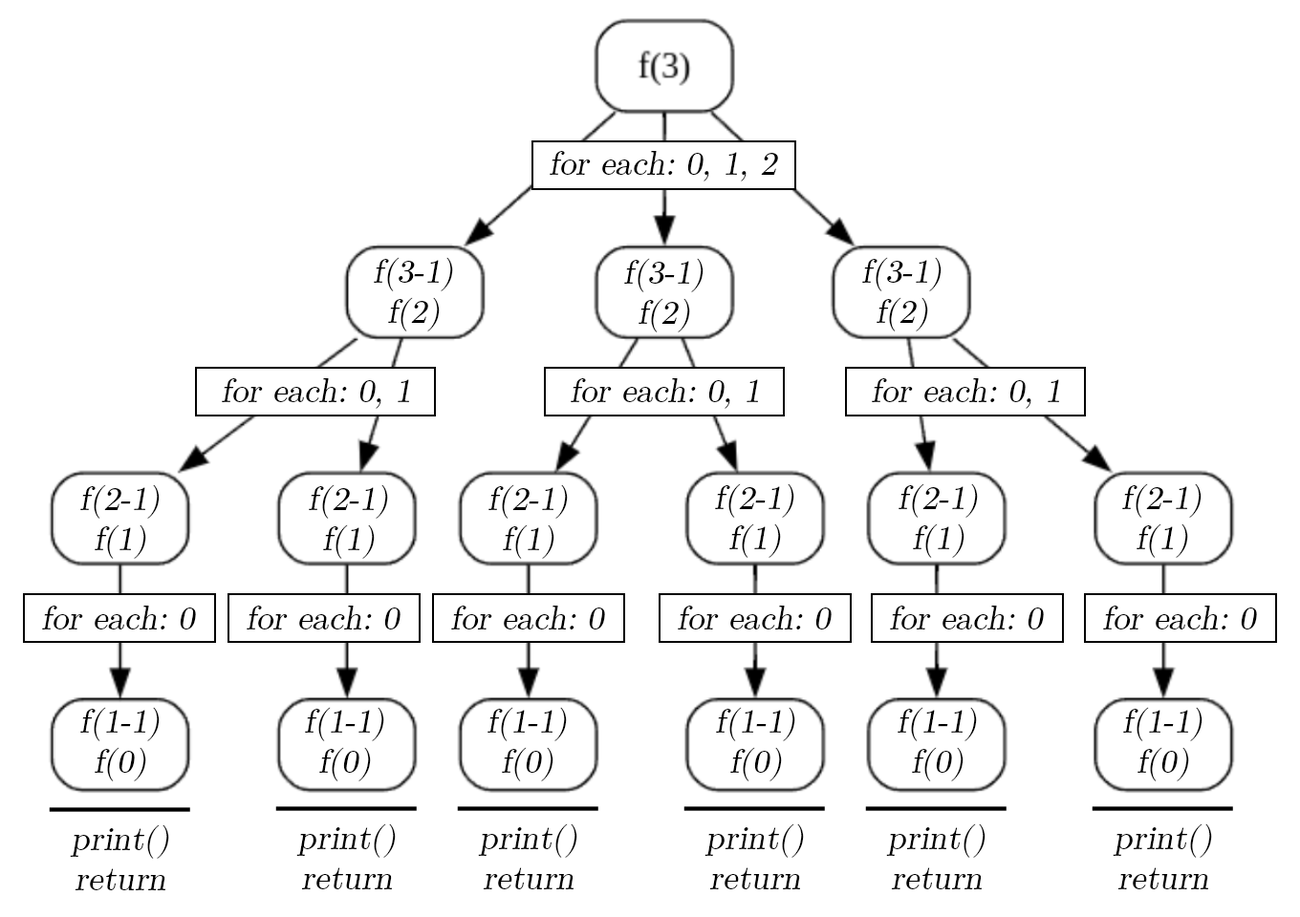
<style>
.page{position:relative;width:1300px;height:917px;background:#ffffff}
.page>*{position:absolute;margin:0}
.t1{font:33.4px "LatinModernMath-Regular";color:#000000;font-style:italic}
</style>
<div class="page">
<p class="t1" style="left:550px;top:151px;width:228px;height:31px">for each: 0, 1, 2</p>
<p class="t1" style="left:374px;top:257px;width:79px;height:75px;text-align:center">f(3-1)<br>f(2)</p>
<p class="t1" style="left:862px;top:257px;width:79px;height:75px;text-align:center">f(3-1)<br>f(2)</p>
<p class="t1" style="left:624px;top:258px;width:79px;height:75px;text-align:center">f(3-1)<br>f(2)</p>
<p class="t1" style="left:222px;top:378px;width:187px;height:31px">for each: 0, 1</p>
<p class="t1" style="left:571px;top:378px;width:187px;height:31px">for each: 0, 1</p>
<p class="t1" style="left:872px;top:378px;width:187px;height:31px">for each: 0, 1</p>
<p class="t1" style="left:80px;top:485px;width:80px;height:74px;text-align:center">f(2-1)<br>f(1)</p>
<p class="t1" style="left:309px;top:485px;width:79px;height:74px;text-align:center">f(2-1)<br>f(1)</p>
<p class="t1" style="left:488px;top:485px;width:80px;height:74px;text-align:center">f(2-1)<br>f(1)</p>
<p class="t1" style="left:715px;top:484px;width:79px;height:74px;text-align:center">f(2-1)<br>f(1)</p>
<p class="t1" style="left:898px;top:484px;width:80px;height:74px;text-align:center">f(2-1)<br>f(1)</p>
<p class="t1" style="left:1122px;top:484px;width:79px;height:74px;text-align:center">f(2-1)<br>f(1)</p>
<p class="t1" style="left:42px;top:606px;width:154px;height:24px">for each: 0</p>
<p class="t1" style="left:42px;top:606px;width:154px;height:24px">for each: 0</p>
<p class="t1" style="left:247px;top:606px;width:153px;height:24px">for each: 0</p>
<p class="t1" style="left:247px;top:606px;width:153px;height:24px">for each: 0</p>
<p class="t1" style="left:451px;top:606px;width:154px;height:24px">for each: 0</p>
<p class="t1" style="left:678px;top:606px;width:153px;height:24px">for each: 0</p>
<p class="t1" style="left:890px;top:606px;width:154px;height:24px">for each: 0</p>
<p class="t1" style="left:1103px;top:606px;width:154px;height:24px">for each: 0</p>
<p class="t1" style="left:80px;top:707px;width:80px;height:75px;text-align:center">f(1-1)<br>f(0)</p>
<p class="t1" style="left:305px;top:707px;width:79px;height:75px;text-align:center">f(1-1)<br>f(0)</p>
<p class="t1" style="left:487px;top:707px;width:80px;height:75px;text-align:center">f(1-1)<br>f(0)</p>
<p class="t1" style="left:716px;top:707px;width:79px;height:75px;text-align:center">f(1-1)<br>f(0)</p>
<p class="t1" style="left:897px;top:707px;width:80px;height:75px;text-align:center">f(1-1)<br>f(0)</p>
<p class="t1" style="left:1123px;top:707px;width:79px;height:75px;text-align:center">f(1-1)<br>f(0)</p>
<p class="t1" style="left:70px;top:825px;width:99px;height:66px;text-align:center">print()<br>return</p>
<p class="t1" style="left:296px;top:824px;width:100px;height:66px;text-align:center">print()<br>return</p>
<p class="t1" style="left:478px;top:824px;width:99px;height:66px;text-align:center">print()<br>return</p>
<p class="t1" style="left:704px;top:824px;width:100px;height:66px;text-align:center">print()<br>return</p>
<p class="t1" style="left:886px;top:824px;width:99px;height:66px;text-align:center">print()<br>return</p>
<p class="t1" style="left:1112px;top:824px;width:100px;height:66px;text-align:center">print()<br>return</p>
</div>
